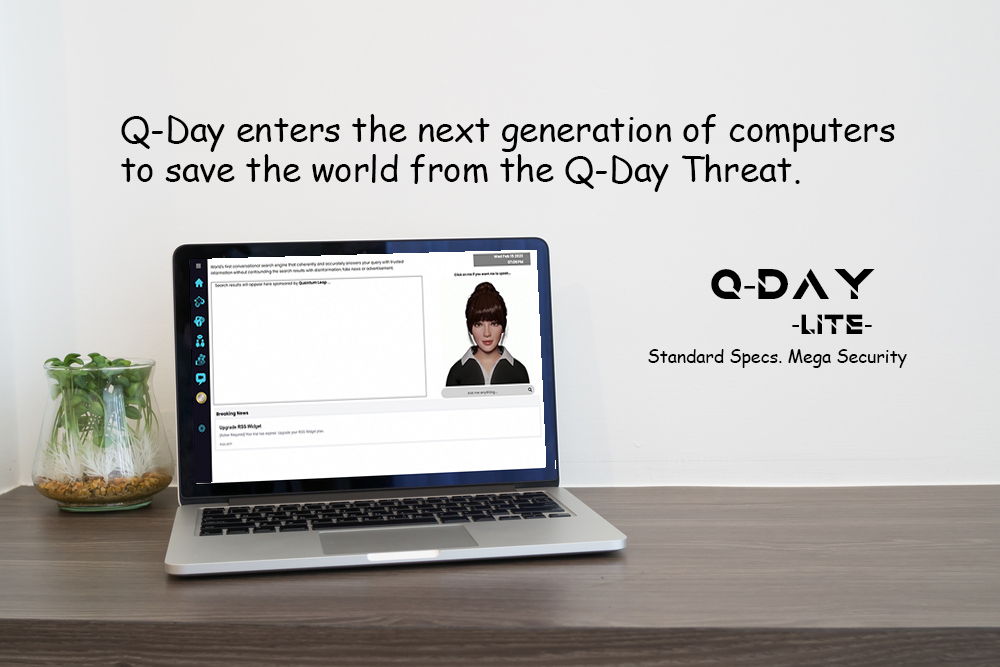
<style>
.page{position:relative;width:1000px;height:667px}
.page>*{position:absolute;margin:0}
.t1{font:34.5px/40px "ComicSansMS";color:#000000}
.t2{font:43.5px "QuantumRegular";color:#000000}
.t3{font:43.5px "MyriadPro-Regular";color:#000000}
.t4{font:28.3px "QuantumRegular";color:#000000}
.t5{font:28.3px "MyriadPro-Regular";color:#000000}
.t6{font:17.6px "ComicSansMS";color:#000000}
</style>
<div class="page">
<p class="t1" style="left:121px;top:114px;width:774px;height:78px">Q-Day enters the next generation of computers <br>to save the world from the Q-Day Threat.</p>
<p class="t2" style="left:711px;top:268px;width:164px;height:31px">Q<span class="t3">-</span>DAY</p>
<p class="t4" style="left:792px;top:314px;width:80px;height:20px"><span class="t5">-</span>LITE<span class="t5">-</span></p>
<p class="t6" style="left:648px;top:349px;width:259px;height:19px">Standard Specs. Mega Security</p>
</div>
